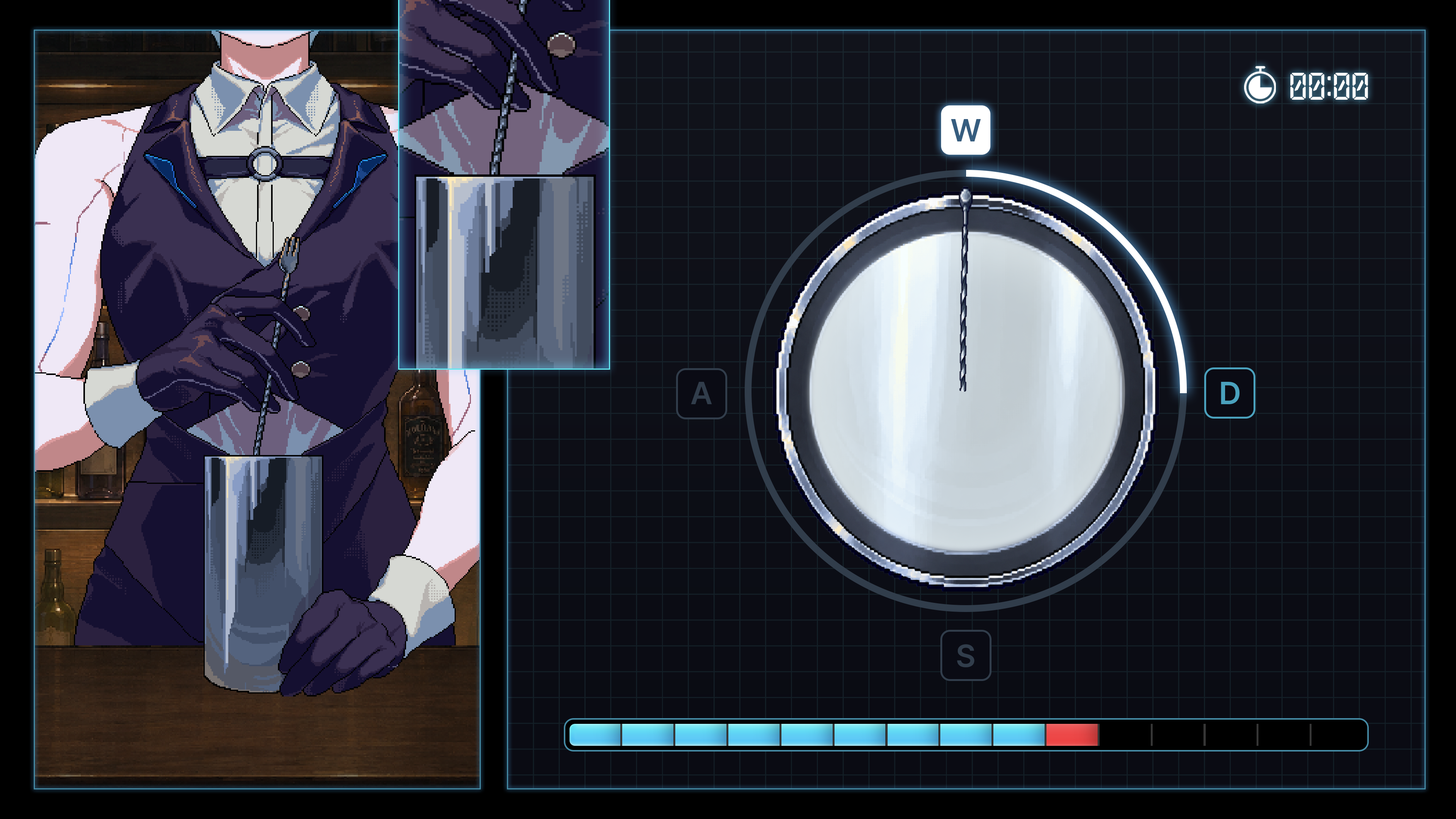
<style>
.page{position:relative;width:1456px;height:819px}
.page>*{position:absolute;margin:0}
.t1{font:34.7px "LABDigital";color:#ffffff;text-transform:uppercase}
.t2{font:31.6px "Pretendard-SemiBold";letter-spacing:-0.05em;color:#365d7f}
.t3{font:31.6px "Pretendard-SemiBold";letter-spacing:-0.05em;color:#313d4b}
.t4{font:31.6px "Pretendard-SemiBold";letter-spacing:-0.05em;color:#4aa1bd}
</style>
<div class="page">
<p class="t1" style="left:1290px;top:73px;width:78px;height:27px">00:00</p>
<p class="t2" style="left:951px;top:119px;width:30px;height:22px">W</p>
<p class="t3" style="left:691px;top:382px;width:21px;height:22px">A</p>
<p class="t4" style="left:1221px;top:382px;width:18px;height:22px">D</p>
<p class="t3" style="left:957px;top:644px;width:17px;height:23px">S</p>
</div>
